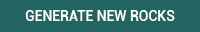
<style>
.page{position:relative;width:200px;height:32px;background:#216462}
.page>*{position:absolute;margin:0}
.t1{font:14px "Roboto-Medium";color:#ffffff}
</style>
<div class="page">
<p class="t1" style="left:25px;top:10px;width:150px;height:11px">GENERATE NEW ROCKS</p>
</div>
